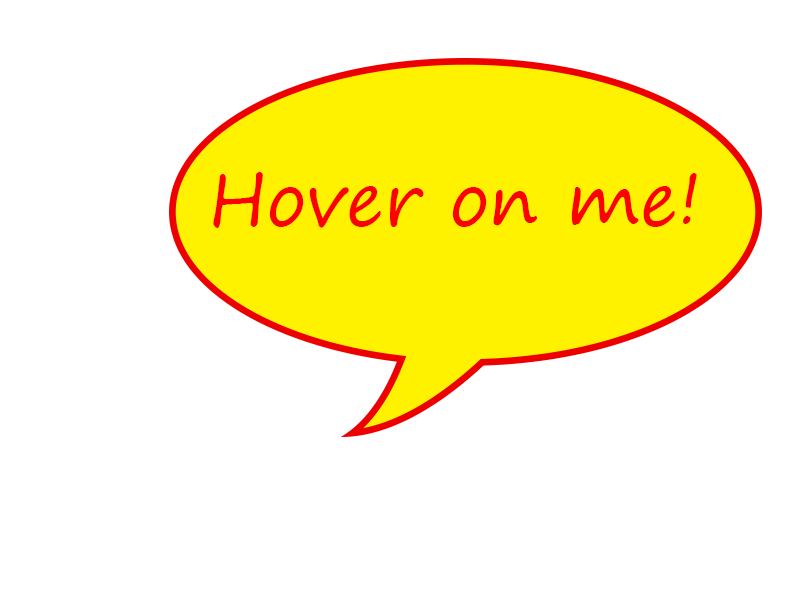
<style>
.page{position:relative;width:800px;height:600px;background:#ffffff}
.page>*{position:absolute;margin:0}
.t1{font:72px "SegoePrint";color:#fd0000}
.t2{font:12px "MyriadPro-Regular";color:#ffffff}
</style>
<div class="page">
<p class="t1" style="left:213px;top:172px;width:484px;height:56px"><span class="t2"><br><br><br><br><br><br> </span>Hover on me!</p>
</div>
